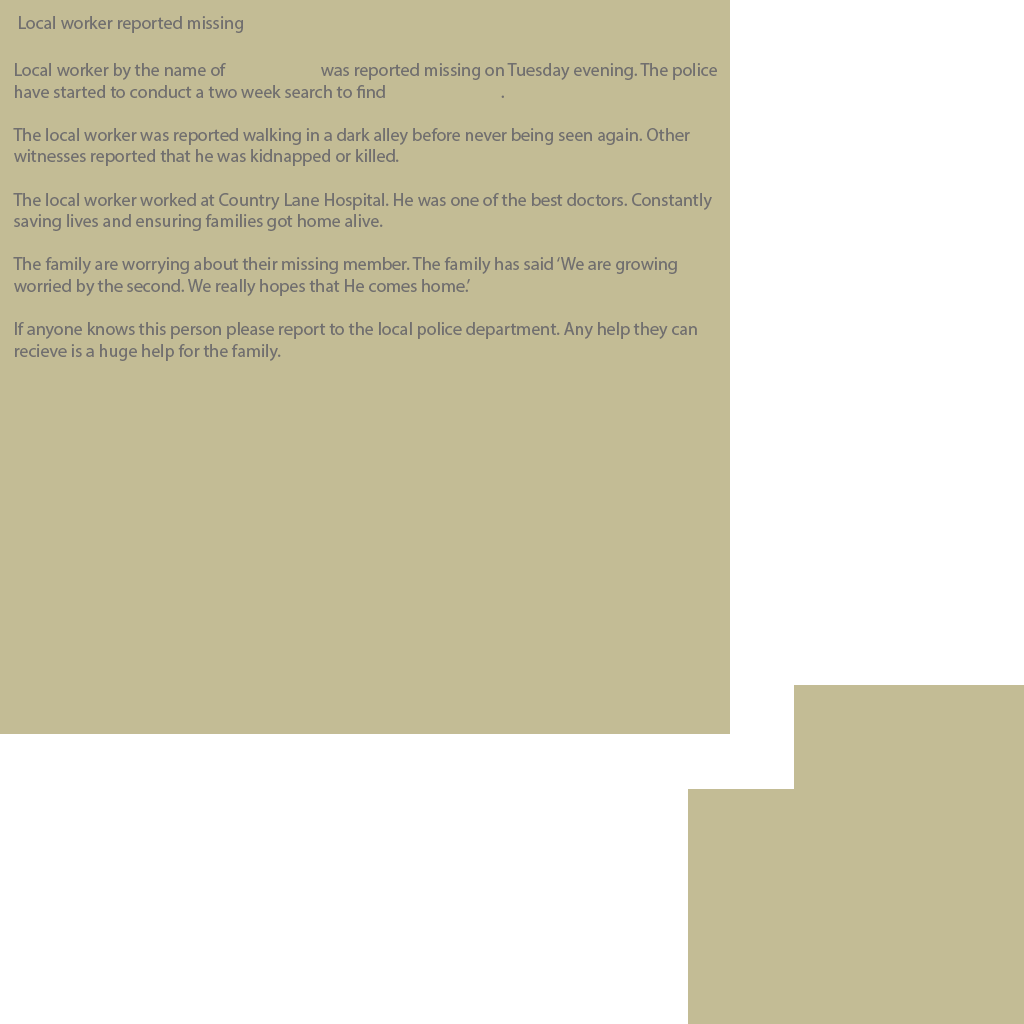
<style>
.page{position:relative;width:1024px;height:1024px;background:#c3bc95}
.page>*{position:absolute;margin:0}
.t1{font:18px "MyriadPro-Regular";color:#716f6f}
</style>
<div class="page">
<p class="t1" style="left:19px;top:16px;width:224px;height:17px">Local worker reported missing</p>
<p class="t1" style="left:13px;top:63px;width:704px;height:298px">Local worker by the name of                         was reported missing on Tuesday evening. The police<br>have started to conduct a two week search to find                              . <br><br>The local worker was reported walking in a dark alley before never being seen again. Other <br>witnesses reported that he was kidnapped or killed.<br><br>The local worker worked at Country Lane Hospital. He was one of the best doctors. Constantly<br>saving lives and ensuring families got home alive.<br><br>The family are worrying about their missing member. The family has said ‘We are growing <br>worried by the second. We really hopes that He comes home.’<br><br>If anyone knows this person please report to the local police department. Any help they can <br>recieve is a huge help for the family.</p>
</div>
